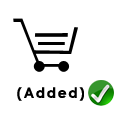
<style>
.page{position:relative;width:120px;height:120px;background:#ffffff}
.page>*{position:absolute;margin:0}
.t1{font:14px "CenturyGothic-Bold";letter-spacing:0.121em;color:#000000}
</style>
<div class="page">
<p class="t1" style="left:17px;top:87px;width:67px;height:14px">(Added)</p>
</div>
